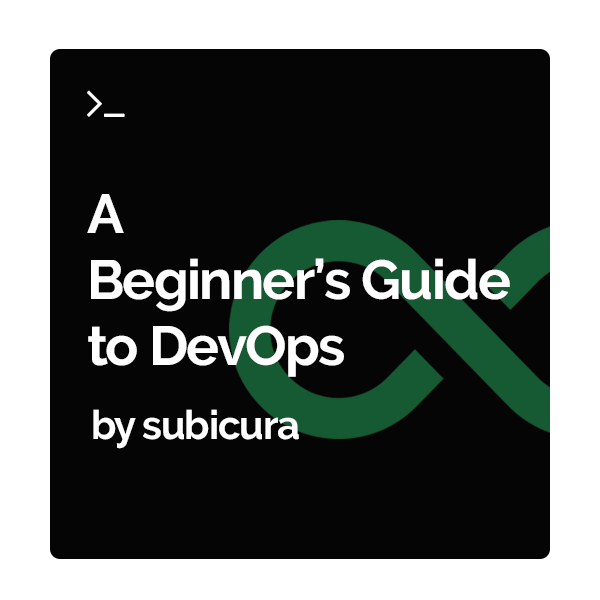
<style>
.page{position:relative;width:600px;height:600px;background:#050505}
.page>*{position:absolute;margin:0}
.t1{font:55px "Raleway-Bold";letter-spacing:-0.03em;color:#ffffff}
.t2{font:40px "Raleway-Bold";letter-spacing:-0.03em;color:#ffffff}
</style>
<div class="page">
<p class="t1" style="left:87px;top:194px;width:423px;height:183px">A<br>Beginner’s Guide<br>to DevOps</p>
<p class="t2" style="left:93px;top:409px;width:206px;height:40px">by subicura</p>
</div>
